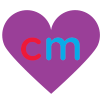
<style>
.page{position:relative;width:103px;height:103px;background:#ffffff}
.page>*{position:absolute;margin:0}
.t1{font:41.7px "GothamRounded-Medium";letter-spacing:-0.025em;color:#ed1939}
.t2{font:41.7px "GothamRounded-Medium";letter-spacing:-0.025em;color:#09abe8}
</style>
<div class="page">
<p class="t1" style="left:21px;top:37px;width:20px;height:24px">c</p>
<p class="t2" style="left:46px;top:37px;width:34px;height:24px">m</p>
</div>
